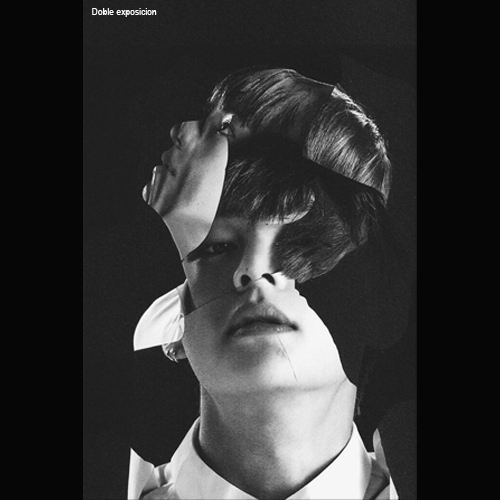
<style>
.page{position:relative;width:500px;height:500px;background:#060606}
.page>*{position:absolute;margin:0}
.t1{font:10.4px "ArialNarrow";color:#fbfbfb}
</style>
<div class="page">
<p class="t1" style="left:92px;top:8px;width:65px;height:9px">Doble exposicion</p>
</div>
